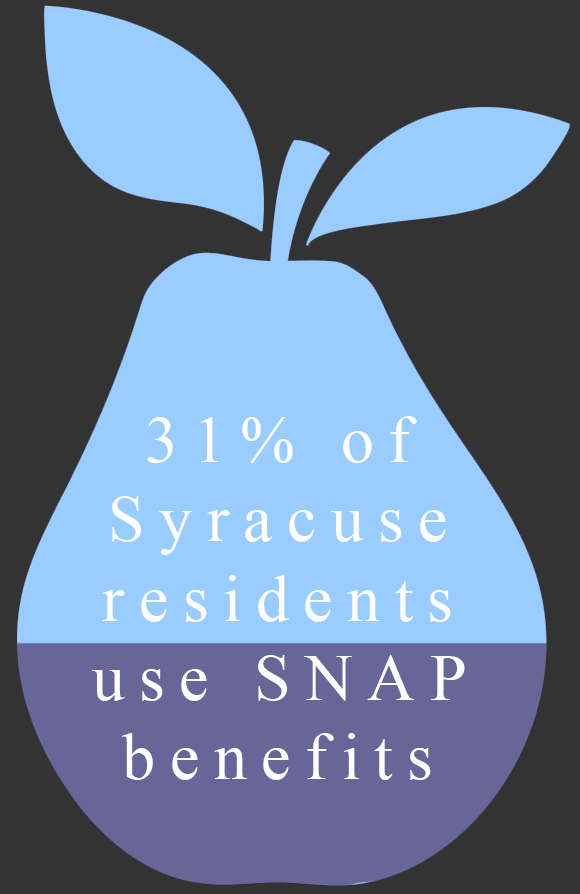
<style>
.page{position:relative;width:580px;height:894px;background:#333333}
.page>*{position:absolute;margin:0}
.t1{font:66px "TimesNewRomanPSMT";letter-spacing:0.22em;color:#ffffff}
</style>
<div class="page">
<p class="t1" style="left:92px;top:416px;width:373px;height:364px;text-align:center">31% of Syracuse residents use SNAP benefits</p>
</div>
